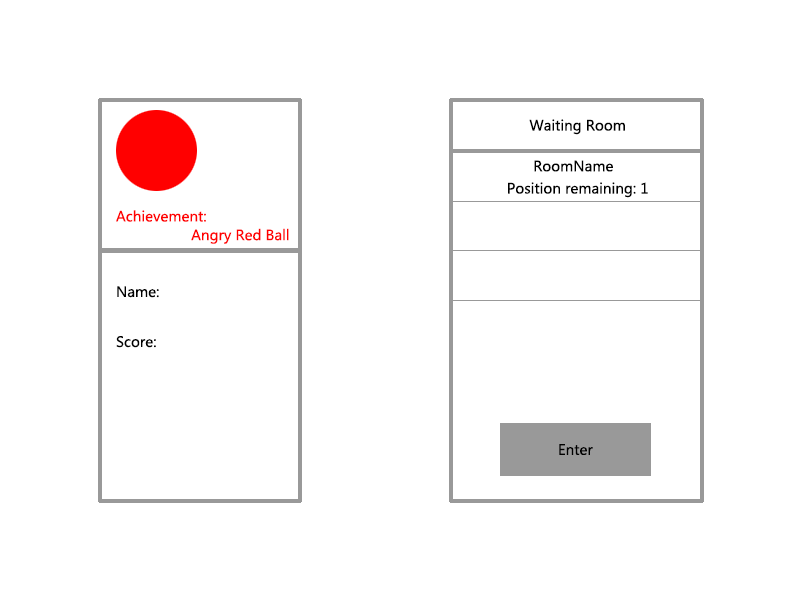
<style>
.page{position:relative;width:800px;height:600px;background:#ffffff}
.page>*{position:absolute;margin:0}
.t1{font:14px "MicrosoftYaHei";color:#000000}
.t2{font:14px "MicrosoftYaHei";color:#ff0000}
</style>
<div class="page">
<p class="t1" style="left:529px;top:119px;width:96px;height:16px">Waiting Room</p>
<p class="t1" style="left:534px;top:160px;width:79px;height:12px">RoomName</p>
<p class="t1" style="left:508px;top:182px;width:140px;height:16px">Position remaining: 1</p>
<p class="t2" style="left:116px;top:210px;width:90px;height:12px">Achievement:</p>
<p class="t2" style="left:191px;top:228px;width:98px;height:16px">Angry Red Ball</p>
<p class="t1" style="left:117px;top:286px;width:42px;height:12px">Name:</p>
<p class="t1" style="left:116px;top:336px;width:40px;height:12px">Score:</p>
<p class="t1" style="left:559px;top:444px;width:34px;height:11px">Enter</p>
</div>
